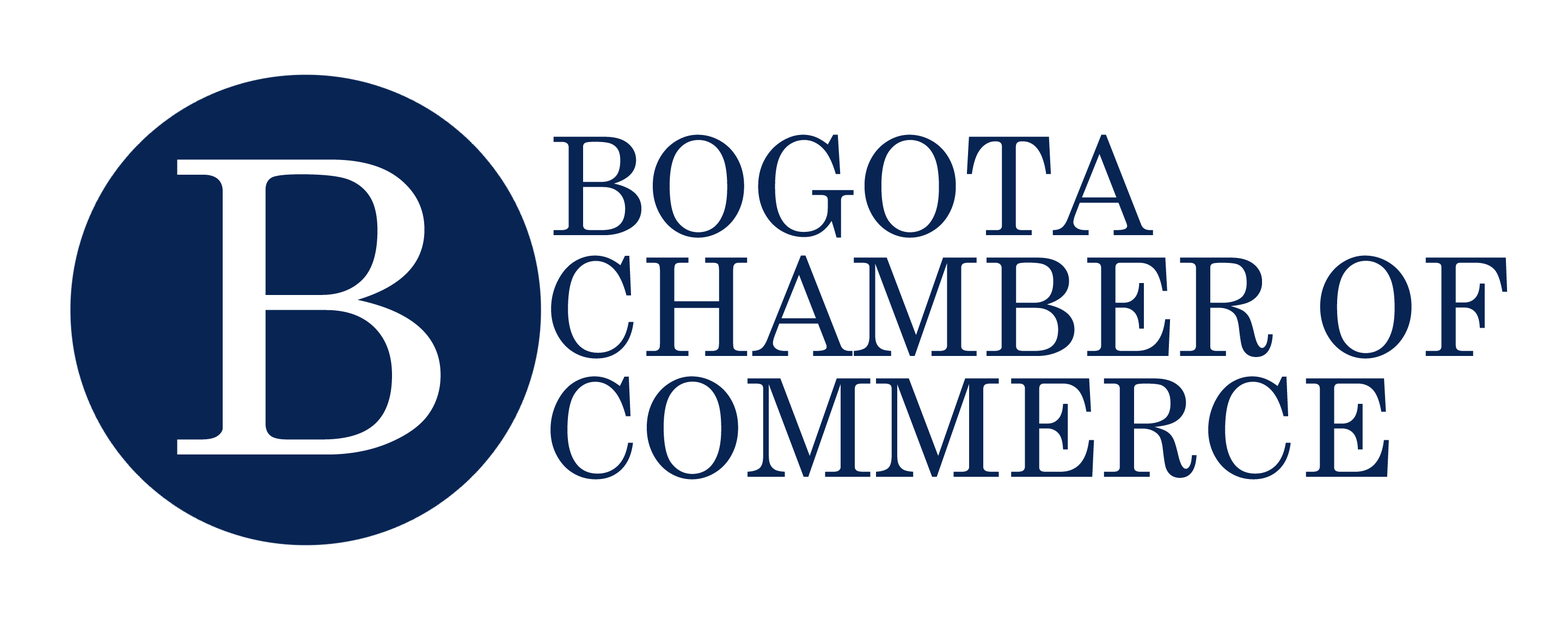
<style>
.page{position:relative;width:1568px;height:627px;background:#ffffff}
.page>*{position:absolute;margin:0}
.t1{font:136.1px "CenturySchoolbook";color:#072453}
.t2{font:408.3px "CenturySchoolbook";color:#ffffff}
</style>
<div class="page">
<p class="t1" style="left:553px;top:134px;width:600px;height:104px">BOGOTA</p>
<p class="t2" style="left:177px;top:160px;width:264px;height:295px">B</p>
<p class="t1" style="left:551px;top:255px;width:957px;height:104px">CHAMBER OF</p>
<p class="t1" style="left:550px;top:376px;width:839px;height:104px">COMMERCE</p>
</div>
